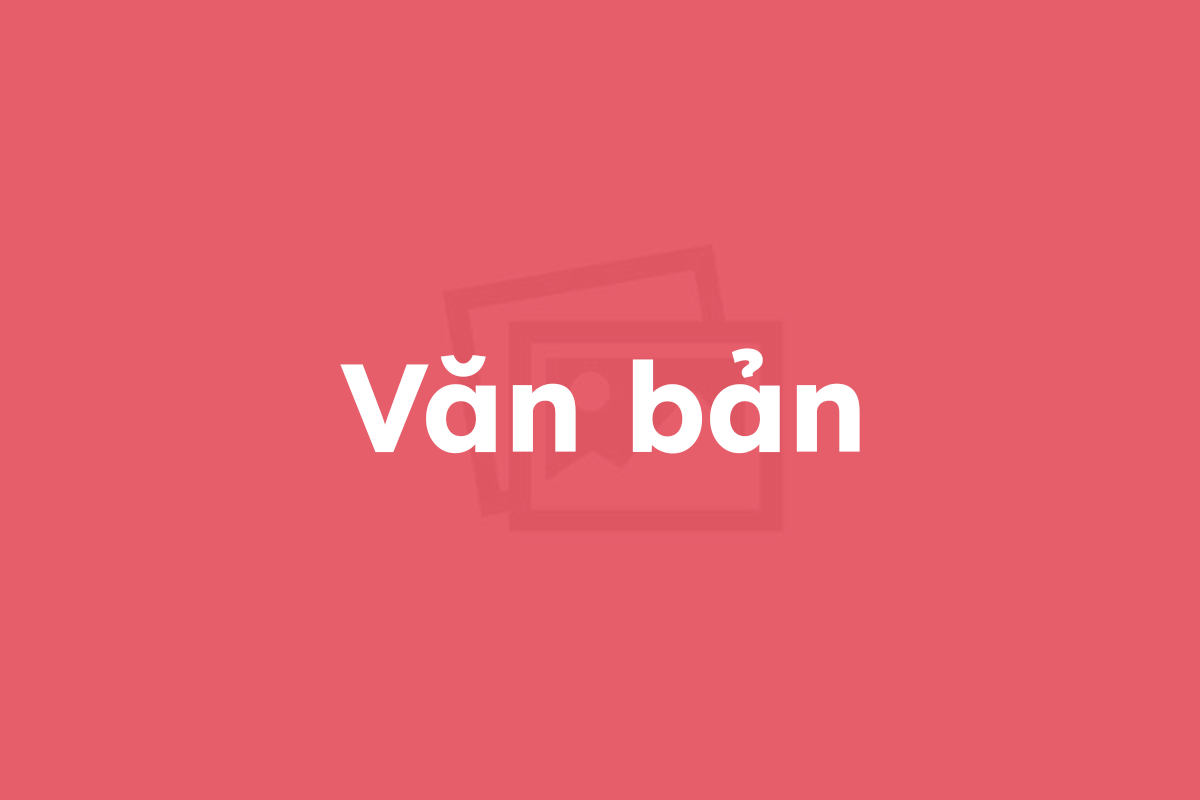
<style>
.page{position:relative;width:1200px;height:800px;background:#e75e6b}
.page>*{position:absolute;margin:0}
.t1{font:125px "Lexend-Bold";color:#ffffff}
</style>
<div class="page">
<p class="t1" style="left:340px;top:348px;width:520px;height:106px">Văn bản</p>
</div>
